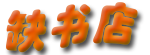
<style>
.page{position:relative;width:150px;height:55px;background:#ffffff}
.page>*{position:absolute;margin:0}
.t1{font:44.4px "STHupo";letter-spacing:0.06em;font-style:italic;scale:0.94 1}
</style>
<div class="page">
<p class="t1" style="left:6px;top:2px;width:132px;height:51px">缺书店</p>
</div>
